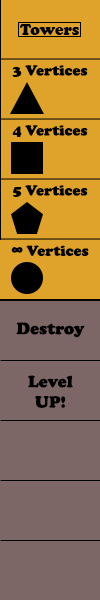
<style>
.page{position:relative;width:100px;height:600px;background:#7c6666}
.page>*{position:absolute;margin:0}
.t1{font:16px "CooperBlack";color:#000000}
.t2{font:15px "CooperBlack";color:#000000}
.t3{font:17px "CooperBlack";color:#000000}
</style>
<div class="page">
<p class="t1" style="left:20px;top:24px;width:59px;height:11px">Towers</p>
<p class="t2" style="left:12px;top:65px;width:76px;height:12px">3 Vertices</p>
<p class="t2" style="left:12px;top:125px;width:76px;height:12px">4 Vertices</p>
<p class="t2" style="left:13px;top:185px;width:75px;height:12px">5 Vertices</p>
<p class="t2" style="left:11px;top:245px;width:78px;height:11px"><span class="t3">∞</span> Vertices</p>
<p class="t3" style="left:16px;top:322px;width:69px;height:16px">Destroy</p>
<p class="t3" style="left:28px;top:375px;width:45px;height:33px;text-align:center">Level UP!</p>
</div>
